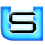
<style>
.page{position:relative;width:45px;height:45px;background:#ffffff}
.page>*{position:absolute;margin:0}
.t1{font:30px "Denton";color:#000000}
</style>
<div class="page">
<p class="t1" style="left:9px;top:12px;width:28px;height:21px">S</p>
</div>
